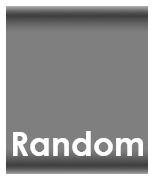
<style>
.page{position:relative;width:154px;height:180px;background:#7f7f7f}
.page>*{position:absolute;margin:0}
.t1{font:33.3px "CenturyGothic-Bold";color:#ffffff}
</style>
<div class="page">
<p class="t1" style="left:13px;top:131px;width:130px;height:25px">Random</p>
</div>
